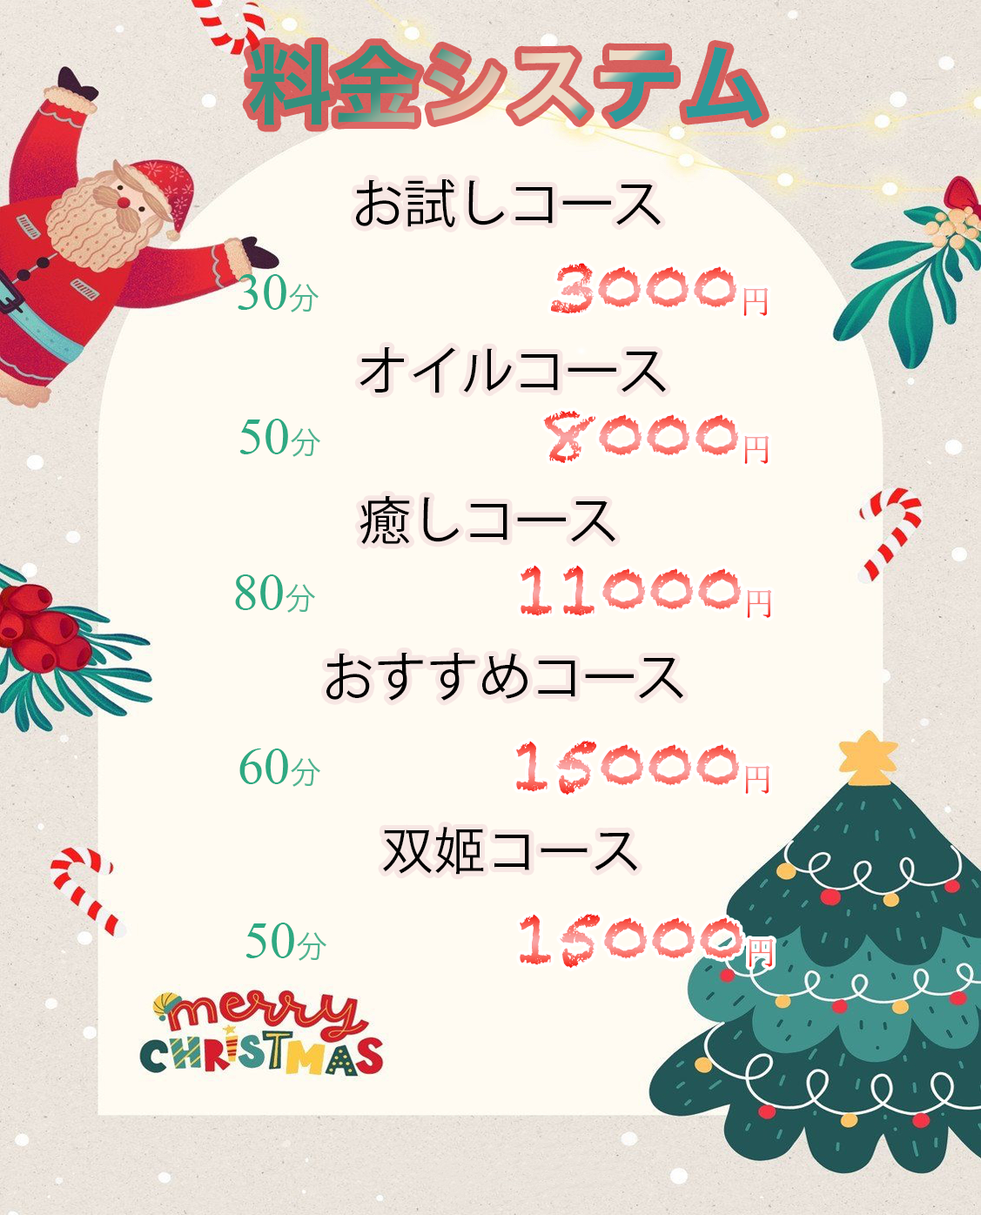
<style>
.page{position:relative;width:981px;height:1215px;background:#fffbf2}
.page>*{position:absolute;margin:0}
.t1{font:87.1px "HiraKakuPro-W6"}
.t2{font:52.2px "KozGoPr6N-Regular";color:#000000}
.t3{font:69.6px "Chalkduster"}
.t4{font:31.3px "SimSong-Regular"}
.t5{font:52.2px "TimesNewRomanPSMT";color:#2ea982}
.t6{font:31.3px "HiraKakuPro-W3";color:#4fb491}
.t7{font:52.2px "HiraKakuPro-W3";color:#000000}
</style>
<div class="page">
<p class="t1" style="left:249px;top:44px;width:514px;height:81px">料金システム</p>
<p class="t2" style="left:356px;top:179px;width:305px;height:48px">お試しコ一ス</p>
<p class="t3" style="left:551px;top:263px;width:217px;height:53px">3000<span class="t4">円</span></p>
<p class="t5" style="left:238px;top:274px;width:81px;height:39px">30<span class="t6">分</span></p>
<p class="t2" style="left:360px;top:347px;width:306px;height:47px">オイルコ一ス</p>
<p class="t3" style="left:543px;top:411px;width:226px;height:53px">8000<span class="t4">円</span></p>
<p class="t5" style="left:239px;top:419px;width:81px;height:38px">50<span class="t6">分</span></p>
<p class="t2" style="left:360px;top:495px;width:256px;height:50px">癒しコ一ス</p>
<p class="t3" style="left:521px;top:565px;width:250px;height:53px">11000<span class="t4">円</span></p>
<p class="t5" style="left:235px;top:575px;width:80px;height:38px">80<span class="t6">分</span></p>
<p class="t2" style="left:326px;top:653px;width:357px;height:48px">おすすめコ一ス</p>
<p class="t5" style="left:239px;top:749px;width:81px;height:38px">60<span class="t6">分</span></p>
<p class="t3" style="left:516px;top:741px;width:254px;height:55px">15000<span class="t4">円</span></p>
<p class="t7" style="left:383px;top:827px;width:254px;height:48px">双姬コ一ス</p>
<p class="t3" style="left:520px;top:914px;width:253px;height:55px">15000<span class="t4">円</span></p>
<p class="t5" style="left:246px;top:923px;width:80px;height:38px">50<span class="t6">分</span></p>
</div>
